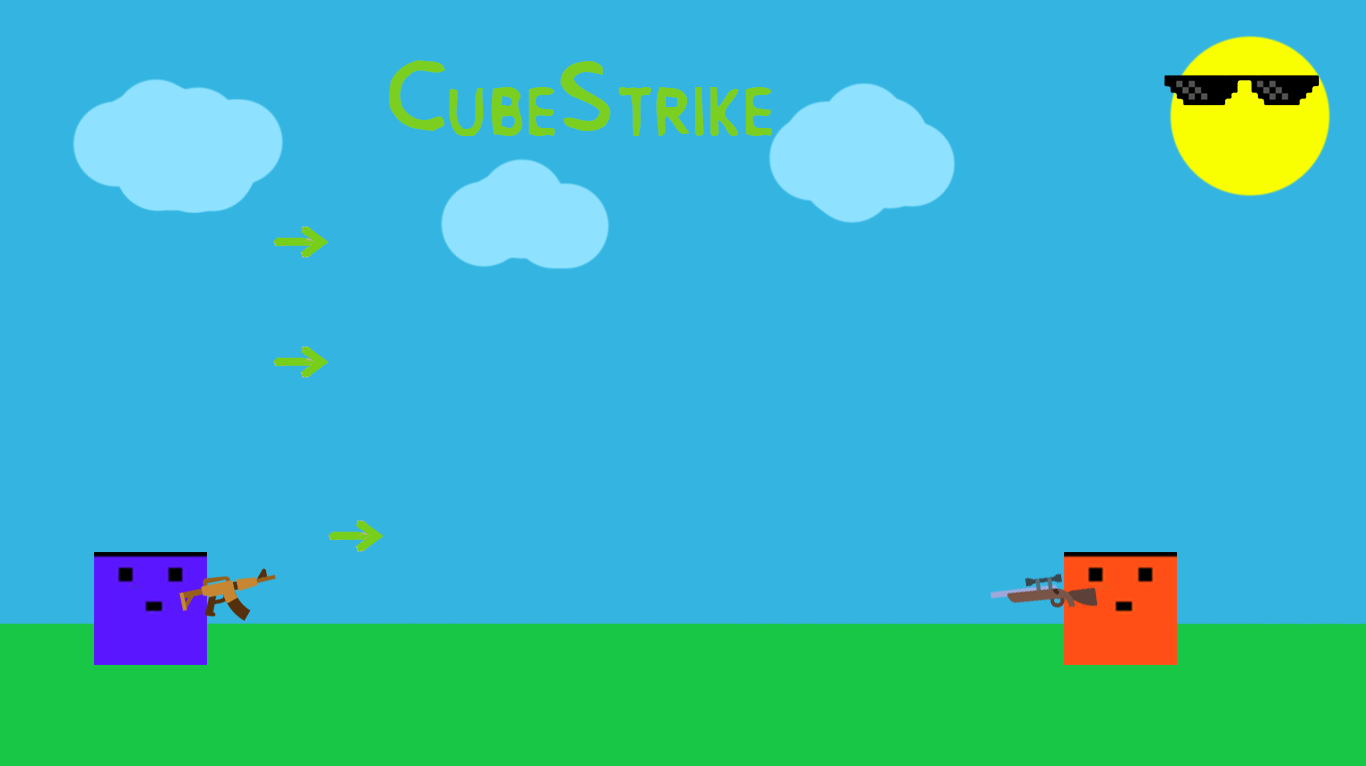
<style>
.page{position:relative;width:1366px;height:766px;background:#34b5e1}
.page>*{position:absolute;margin:0}
.t1{font:110px "PingPong";color:#7acf20;font-variant:small-caps}
</style>
<div class="page">
<p class="t1" style="left:389px;top:60px;width:383px;height:76px">CubeStrike</p>
</div>
